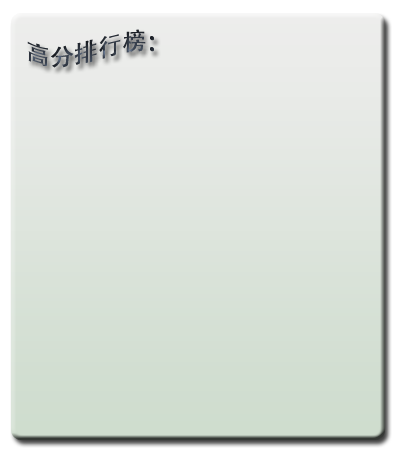
<style>
.page{position:relative;width:400px;height:460px}
.page>*{position:absolute;margin:0}
.t1{font:24px "AdobeHeitiStd-Regular"}
</style>
<div class="page">
<p class="t1" style="left:27px;top:29px;width:127px;height:39px">高分排行榜：</p>
</div>
